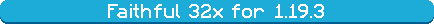
<style>
.page{position:relative;width:434px;height:24px;background:#1dacd8}
.page>*{position:absolute;margin:0}
.t1{font:24px "ComplianceSans";color:#ffffff}
</style>
<div class="page">
<p class="t1" style="left:108px;top:4px;width:216px;height:14px">Faithful 32x for 1.19.3</p>
</div>
